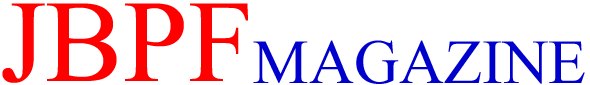
<style>
.page{position:relative;width:590px;height:85px;background:#ffffff}
.page>*{position:absolute;margin:0}
.t1{font:116.7px "TimesNewRomanPSMT";color:#ff0000}
.t2{font:62.5px "TimesNewRomanPSMT";color:#0000cc}
</style>
<div class="page">
<p class="t1" style="left:2px;top:3px;width:246px;height:80px">JBPF</p>
<p class="t2" style="left:253px;top:40px;width:332px;height:44px">MAGAZINE</p>
</div>
